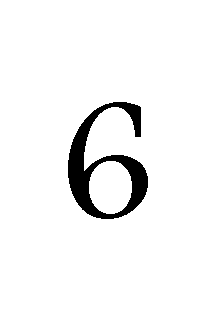
<style>
.page{position:relative;width:222px;height:323px;background:#ffffff}
.page>*{position:absolute;margin:0}
.t1{font:180px "FootlightMTLight";color:#000000}
</style>
<div class="page">
<p class="t1" style="left:68px;top:102px;width:80px;height:117px">6</p>
</div>
